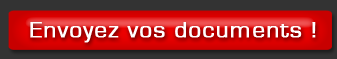
<style>
.page{position:relative;width:337px;height:59px;background:#333333}
.page>*{position:absolute;margin:0}
.t1{font:23.1px "EurostileRegular";letter-spacing:0.03em;color:#ffffff;font-weight:bold;scale:1.08 1}
</style>
<div class="page">
<p class="t1" style="left:30px;top:22px;width:286px;height:21px">Envoyez vos documents !</p>
</div>
